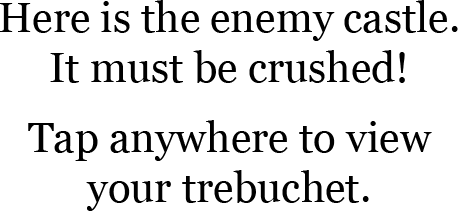
<style>
.page{position:relative;width:458px;height:211px;background:#ffffff}
.page>*{position:absolute;margin:0}
.t1{font:42px/45px "Georgia";color:#000000}
.t2{font:42px/50px "Georgia";color:#000000}
.t3{font:42px/70px "Georgia";color:#000000}
</style>
<div class="page">
<p class="t1" style="left:0px;top:0px;width:458px;height:211px;text-align:center">Here is the enemy castle.<br><span class="t2">It must be crushed!<br></span><span class="t3">Tap</span> anywhere to view<br><span class="t2">your trebuchet.</span></p>
</div>
